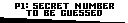
<style>
.page{position:relative;width:128px;height:23px;background:#ffffff}
.page>*{position:absolute;margin:0}
.t1{font:16.9px "Gamer";letter-spacing:-0.02em;color:#000000}
</style>
<div class="page">
<p class="t1" style="left:15px;top:3px;width:99px;height:13px;text-align:center">P1: SECRET NUMBER<br>TO BE GUESSED</p>
</div>
